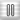
<style>
.page{position:relative;width:20px;height:20px}
.page>*{position:absolute;margin:0}
.t1{font:10px "MyriadPro-BoldIt";color:#c3c3c3}
</style>
<div class="page">
<p class="t1" style="left:7px;top:5px;width:7px;height:11px">| |</p>
</div>
